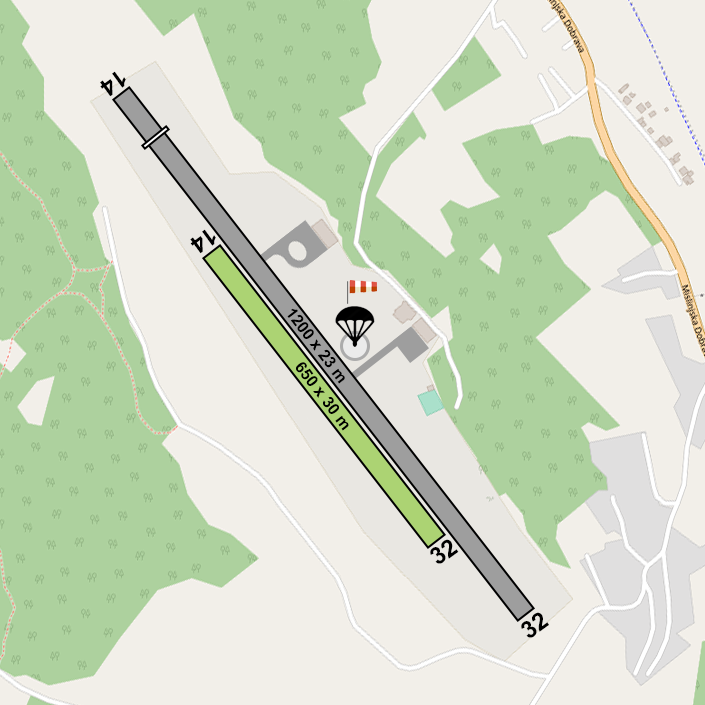
<style>
.page{position:relative;width:705px;height:705px;background:#f2efe9}
.page>*{position:absolute;margin:0}
.t1{font:24px "Arial-BoldMT";color:#000000}
.t2{font:16px "Arial-BoldMT";color:#000000}
</style>
<div class="page">
<p class="t1" style="left:100px;top:71px;width:26px;height:26px;rotate:144deg">14</p>
<p class="t1" style="left:190px;top:229px;width:26px;height:25px;rotate:144deg">14</p>
<p class="t2" style="left:287px;top:308px;width:58px;height:76px;rotate:52deg">1200 x 23 m</p>
<p class="t2" style="left:296px;top:362px;width:53px;height:69px;rotate:52deg">650 x 30 m</p>
<p class="t1" style="left:430px;top:539px;width:29px;height:25px;rotate:-36deg">32</p>
<p class="t1" style="left:521px;top:612px;width:28px;height:26px;rotate:-36deg">32</p>
</div>
